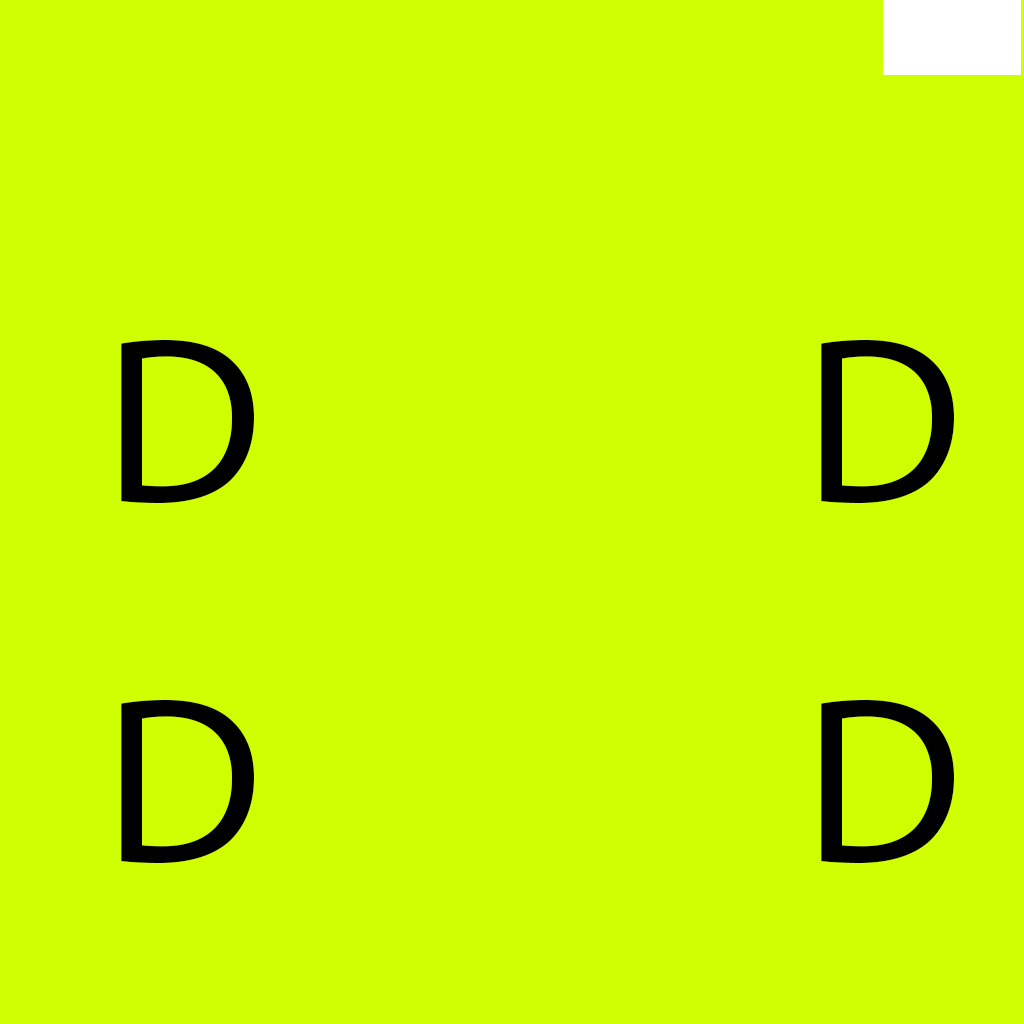
<style>
.page{position:relative;width:1024px;height:1024px;background:#cfff00}
.page>*{position:absolute;margin:0}
.t1{font:239px "MyriadPro-Regular";color:#000000}
</style>
<div class="page">
<p class="t1" style="left:121px;top:340px;width:133px;height:163px">D</p>
<p class="t1" style="left:821px;top:340px;width:133px;height:163px">D</p>
<p class="t1" style="left:121px;top:700px;width:133px;height:163px">D</p>
<p class="t1" style="left:821px;top:700px;width:133px;height:163px">D</p>
</div>
